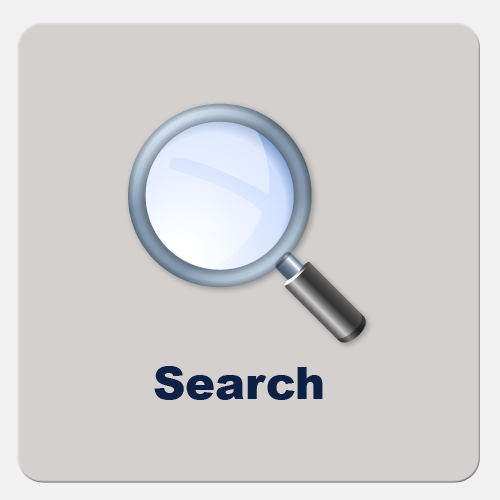
<style>
.page{position:relative;width:500px;height:500px;background:#d4d0d0}
.page>*{position:absolute;margin:0}
.t1{font:45px "Arial-Black";color:#0e2144}
</style>
<div class="page">
<p class="t1" style="left:154px;top:366px;width:169px;height:34px">Search</p>
</div>
